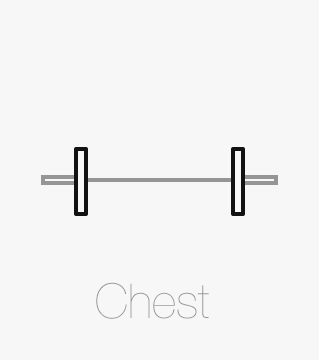
<style>
.page{position:relative;width:319px;height:360px;background:#f7f7f7}
.page>*{position:absolute;margin:0}
.t1{font:48px "HelveticaNeue-UltraLight";color:#959595}
</style>
<div class="page">
<p class="t1" style="left:96px;top:282px;width:113px;height:37px">Chest</p>
</div>
